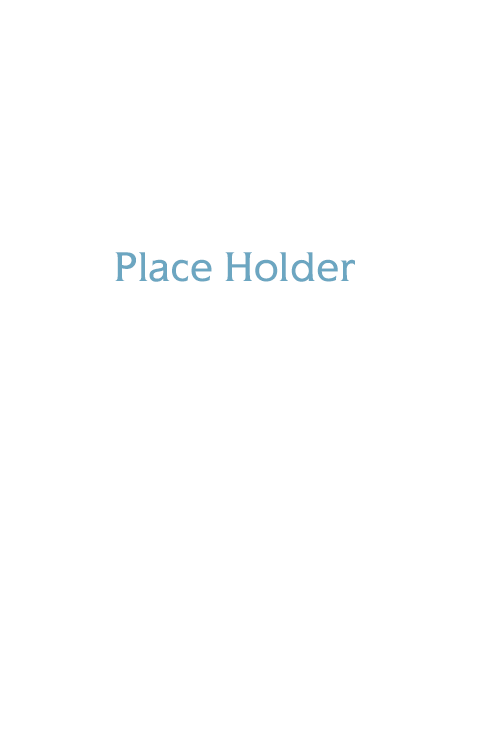
<style>
.page{position:relative;width:500px;height:750px;background:#ffffff}
.page>*{position:absolute;margin:0}
.t1{font:43.2px "ELANCCC";color:#6ca6c1}
</style>
<div class="page">
<p class="t1" style="left:115px;top:252px;width:240px;height:30px">Place Holder</p>
</div>
